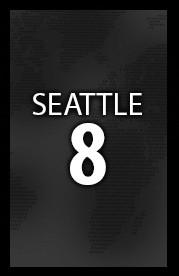
<style>
.page{position:relative;width:179px;height:276px}
.page>*{position:absolute;margin:0}
.t1{font:31.7px "MyriadPro-Regular";color:#ffffff}
.t2{font:93px "MyriadPro-BoldCond";color:#ffffff}
</style>
<div class="page">
<p class="t1" style="left:32px;top:93px;width:110px;height:22px">SEATTLE</p>
<p class="t2" style="left:70px;top:123px;width:36px;height:62px">8</p>
</div>
